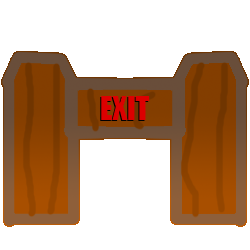
<style>
.page{position:relative;width:250px;height:250px;background:#ffffff}
.page>*{position:absolute;margin:0}
.t1{font:30px "Impact";color:#dc0000}
</style>
<div class="page">
<p class="t1" style="left:100px;top:97px;width:49px;height:24px">EXIT</p>
<p class="t1" style="left:101px;top:96px;width:49px;height:24px">EXIT</p>
</div>
